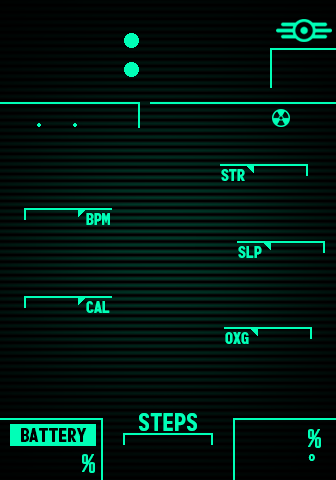
<style>
.page{position:relative;width:336px;height:480px;background:#000000}
.page>*{position:absolute;margin:0}
.t1{font:16px "Monofonto-Regular";color:#00ffb7}
.t2{font:24px "Monofonto-Regular";color:#00ffb7}
.t3{font:18.7px "Monofonto-Regular";color:#000000}
.t4{font:13.3px "Monofonto-Regular";color:#00ffb7}
</style>
<div class="page">
<p class="t1" style="left:221px;top:169px;width:24px;height:12px">STR</p>
<p class="t1" style="left:86px;top:213px;width:24px;height:12px">BPM</p>
<p class="t1" style="left:238px;top:246px;width:24px;height:12px">SLP</p>
<p class="t1" style="left:86px;top:301px;width:24px;height:12px">CAL</p>
<p class="t1" style="left:225px;top:332px;width:24px;height:12px">OXG</p>
<p class="t2" style="left:139px;top:413px;width:58px;height:18px">STEPS</p>
<p class="t3" style="left:21px;top:428px;width:66px;height:14px">BATTERY</p>
<p class="t2" style="left:308px;top:429px;width:13px;height:19px">%</p>
<p class="t2" style="left:82px;top:454px;width:13px;height:19px">%</p>
<p class="t4" style="left:308px;top:454px;width:7px;height:7px">o</p>
</div>
